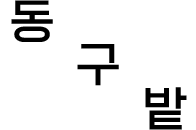
<style>
.page{position:relative;width:196px;height:130px;background:#ffffff}
.page>*{position:absolute;margin:0}
.t1{font:48px "esamanruLight";color:#000000}
</style>
<div class="page">
<p class="t1" style="left:11px;top:0px;width:42px;height:42px">동</p>
<p class="t1" style="left:77px;top:44px;width:42px;height:42px">구</p>
<p class="t1" style="left:145px;top:87px;width:42px;height:43px">밭</p>
</div>
